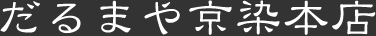
<style>
.page{position:relative;width:376px;height:36px;background:#333333}
.page>*{position:absolute;margin:0}
.t1{font:48px "DFLeiSho-SB-MP-RKSJ-H";color:#ffffff}
</style>
<div class="page">
<p class="t1" style="left:0px;top:0px;width:376px;height:35px">だるまや京染本店</p>
</div>
